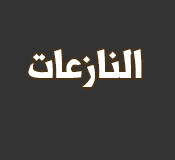
<style>
.page{position:relative;width:175px;height:160px;background:#333333}
.page>*{position:absolute;margin:0}
.t1{font:48px "Shorooq_N1";color:#fefefe}
</style>
<div class="page">
<p class="t1" style="left:28px;top:49px;width:114px;height:38px">النازعات</p>
</div>
